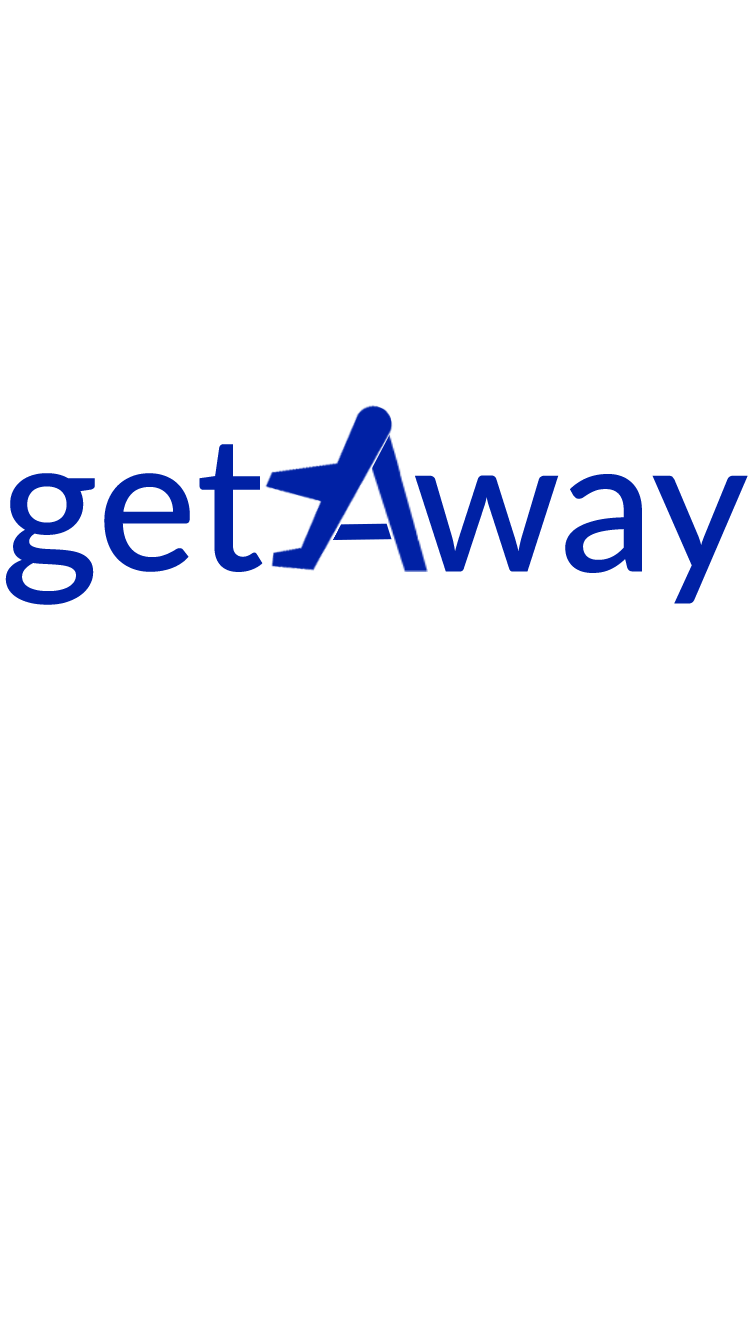
<style>
.page{position:relative;width:750px;height:1334px;background:#ffffff}
.page>*{position:absolute;margin:0}
.t1{font:188px "Lato-Medium";color:#0021a5}
</style>
<div class="page">
<p class="t1" style="left:5px;top:444px;width:258px;height:161px">get</p>
<p class="t1" style="left:415px;top:474px;width:333px;height:130px">way</p>
</div>
